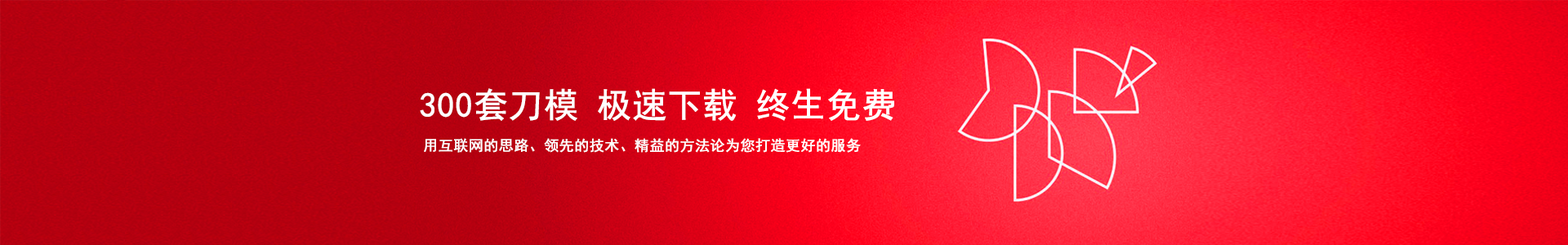
<style>
.page{position:relative;width:1568px;height:245px}
.page>*{position:absolute;margin:0}
.t1{font:34.3px "SimHei";color:#ffffff;font-weight:bold}
.t2{font:14.7px "SimHei";color:#ffffff;font-weight:bold}
</style>
<div class="page">
<p class="t1" style="left:420px;top:88px;width:474px;height:33px">300套刀模 极速下载 终生免费</p>
<p class="t2" style="left:424px;top:138px;width:437px;height:15px">用互联网的思路、领先的技术、精益的方法论为您打造更好的服务</p>
</div>
